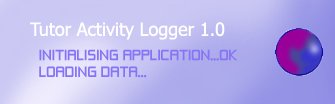
<style>
.page{position:relative;width:335px;height:104px}
.page>*{position:absolute;margin:0}
.t1{font:18px "Tahoma";color:#ffffff}
.t2{font:14px "ZeroThrees";color:#8673f5}
</style>
<div class="page">
<p class="t1" style="left:30px;top:22px;width:195px;height:18px">Tutor Activity Logger 1.0</p>
<p class="t2" style="left:39px;top:49px;width:198px;height:29px">INITIALISING APPLICATION...OK<br>LOADING DATA...</p>
</div>
